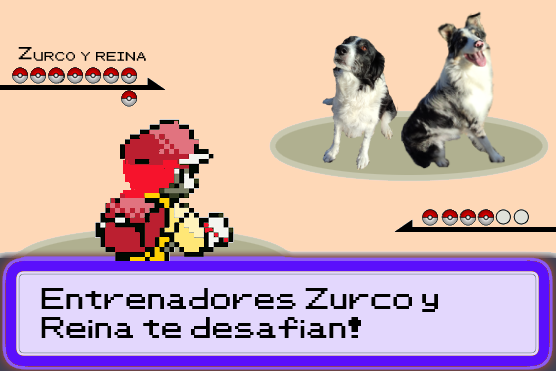
<style>
.page{position:relative;width:556px;height:371px;background:#fed8b7}
.page>*{position:absolute;margin:0}
.t1{font:24px "PKMN-RBYGSC";color:#000000;font-variant:small-caps;font-weight:bold}
.t2{font:24px/0px "PKMN-RBYGSC";color:#000000;font-weight:bold}
</style>
<div class="page">
<p class="t1" style="left:18px;top:47px;width:128px;height:14px">Zurco y reina</p>
<p class="t2" style="left:41px;top:288px;width:397px;height:50px">Entrenadores Zurco y Reina te desafian!</p>
</div>
